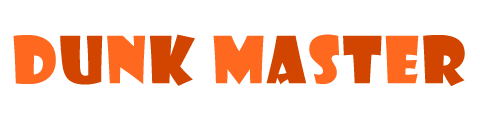
<style>
.page{position:relative;width:480px;height:124px;background:#ffffff}
.page>*{position:absolute;margin:0}
.t1{font:63px "ShowcardGothic-Reg";letter-spacing:0.04em;color:#fe681f}
.t2{font:63px "ShowcardGothic-Reg";letter-spacing:0.04em;color:#d24500}
</style>
<div class="page">
<p class="t1" style="left:13px;top:34px;width:452px;height:52px">d<span class="t2">U</span>N<span class="t2">K</span> M<span class="t2">A</span>S<span class="t2">T</span>E<span class="t2">R</span></p>
</div>
